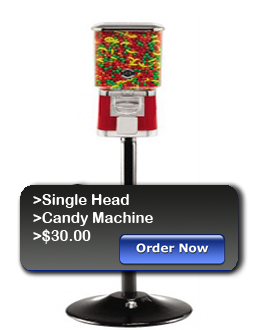
<style>
.page{position:relative;width:254px;height:330px;background:#ffffff}
.page>*{position:absolute;margin:0}
.t1{font:15px "ArialRoundedMTBold";color:#ffffff}
</style>
<div class="page">
<p class="t1" style="left:33px;top:194px;width:120px;height:50px">&gt;Single Head <br>&gt;Candy Machine <br>&gt;$30.00</p>
</div>
